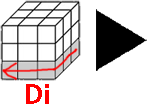
<style>
.page{position:relative;width:162px;height:108px;background:#ffffff}
.page>*{position:absolute;margin:0}
.t1{font:27px "MyriadPro-Regular";color:#ff0000;font-weight:bold}
</style>
<div class="page">
<p class="t1" style="left:26px;top:84px;width:23px;height:20px">Di</p>
</div>
